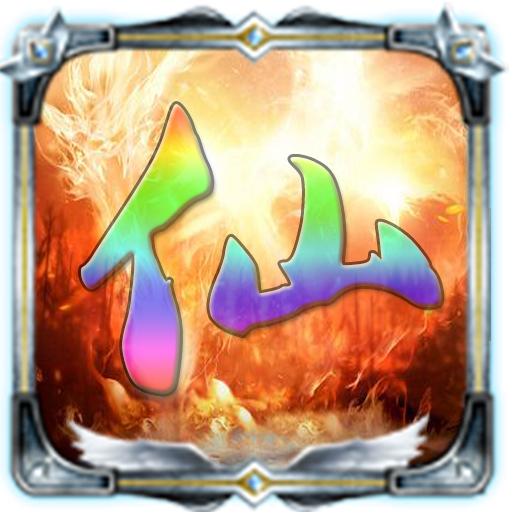
<style>
.page{position:relative;width:512px;height:512px}
.page>*{position:absolute;margin:0}
.t1{font:400.1px "lixukexingshu"}
</style>
<div class="page">
<p class="t1" style="left:81px;top:104px;width:361px;height:290px">仙</p>
</div>
